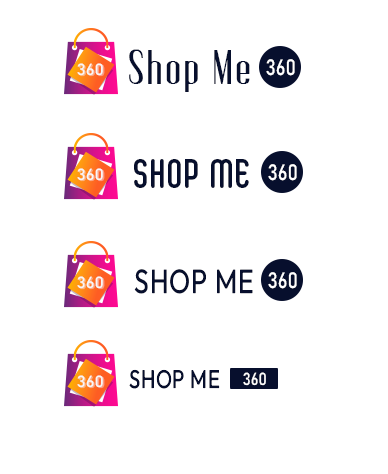
<style>
.page{position:relative;width:388px;height:474px;background:#ffffff}
.page>*{position:absolute;margin:0}
.t1{font:44.2px "FungkaCity-Regular";letter-spacing:0.04em;color:#070f2d;scale:1.05 1}
.t2{font:15.9px "Bahnschrift";color:#f7f7f7;scale:1.08 1}
.t3{font:15.9px "Bahnschrift";scale:1.08 1}
.t4{font:21.9px "Bahnschrift";color:#ffffff;scale:0.87 1}
.t5{font:40.5px "Cactron-Regular";letter-spacing:0.04em;color:#070f2d;scale:1.03 1}
.t6{font:33.5px "Outfit-Regular";letter-spacing:0.04em;color:#070f2d;scale:0.79 1}
.t7{font:25.5px "Outfit-Regular";letter-spacing:0.04em;color:#070f2d;scale:0.79 1}
.t8{font:17.3px "Bahnschrift";color:#ffffff;scale:0.87 1}
</style>
<div class="page">
<p class="t1" style="left:129px;top:49px;width:121px;height:43px">Shop Me</p>
<p class="t2" style="left:77px;top:63px;width:26px;height:13px">360</p>
<p class="t3" style="left:78px;top:64px;width:27px;height:13px">360</p>
<p class="t4" style="left:266px;top:59px;width:29px;height:17px">360</p>
<p class="t5" style="left:134px;top:159px;width:115px;height:29px">SHOP ME</p>
<p class="t2" style="left:77px;top:168px;width:26px;height:13px">360</p>
<p class="t3" style="left:78px;top:169px;width:27px;height:13px">360</p>
<p class="t4" style="left:268px;top:164px;width:29px;height:17px">360</p>
<p class="t6" style="left:134px;top:269px;width:119px;height:25px">SHOP ME</p>
<p class="t2" style="left:77px;top:276px;width:26px;height:13px">360</p>
<p class="t3" style="left:78px;top:277px;width:27px;height:13px">360</p>
<p class="t4" style="left:268px;top:272px;width:29px;height:17px">360</p>
<p class="t2" style="left:77px;top:375px;width:26px;height:13px">360</p>
<p class="t3" style="left:78px;top:376px;width:27px;height:13px">360</p>
<p class="t7" style="left:129px;top:369px;width:91px;height:20px">SHOP ME</p>
<p class="t8" style="left:243px;top:372px;width:23px;height:14px">360</p>
</div>
